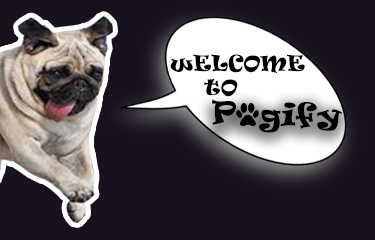
<style>
.page{position:relative;width:375px;height:240px;background:#18121e}
.page>*{position:absolute;margin:0}
.t1{font:20.8px "Ravie";color:#000000}
.t2{font:29.1px/203.4px "Ravie";color:#000000}
.t3{font:29.1px "Ravie";color:#000000}
</style>
<div class="page">
<p class="t1" style="left:170px;top:54px;width:135px;height:19px">wELCOME T</p>
<p class="t1" style="left:204px;top:79px;width:34px;height:18px">tO</p>
<p class="t2" style="left:212px;top:99px;width:24px;height:26px;text-align:center">P<br>P</p>
<p class="t3" style="left:259px;top:102px;width:83px;height:31px">gify</p>
</div>
